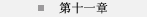
<style>
.page{position:relative;width:147px;height:17px;background:#f1f1f1}
.page>*{position:absolute;margin:0}
.t1{font:12px "SimSun";color:#000000;font-weight:bold}
</style>
<div class="page">
<p class="t1" style="left:39px;top:0px;width:89px;height:17px">第十一章</p>
</div>
